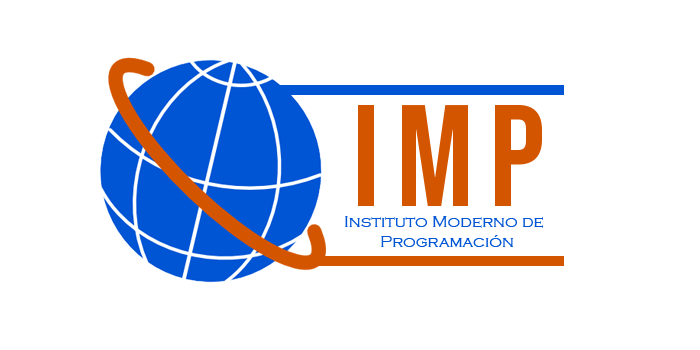
<style>
.page{position:relative;width:700px;height:350px;background:#ffffff}
.page>*{position:absolute;margin:0}
.t1{font:144.8px "BebasNeue-Regular";letter-spacing:0.11em;color:#d45500}
.t2{font:17px "CopperplateGothic-Light";color:#0055d4}
</style>
<div class="page">
<p class="t1" style="left:358px;top:105px;width:184px;height:101px">IMP</p>
<p class="t2" style="left:345px;top:216px;width:198px;height:31px">Instituto Moderno de <br> Programación</p>
</div>
